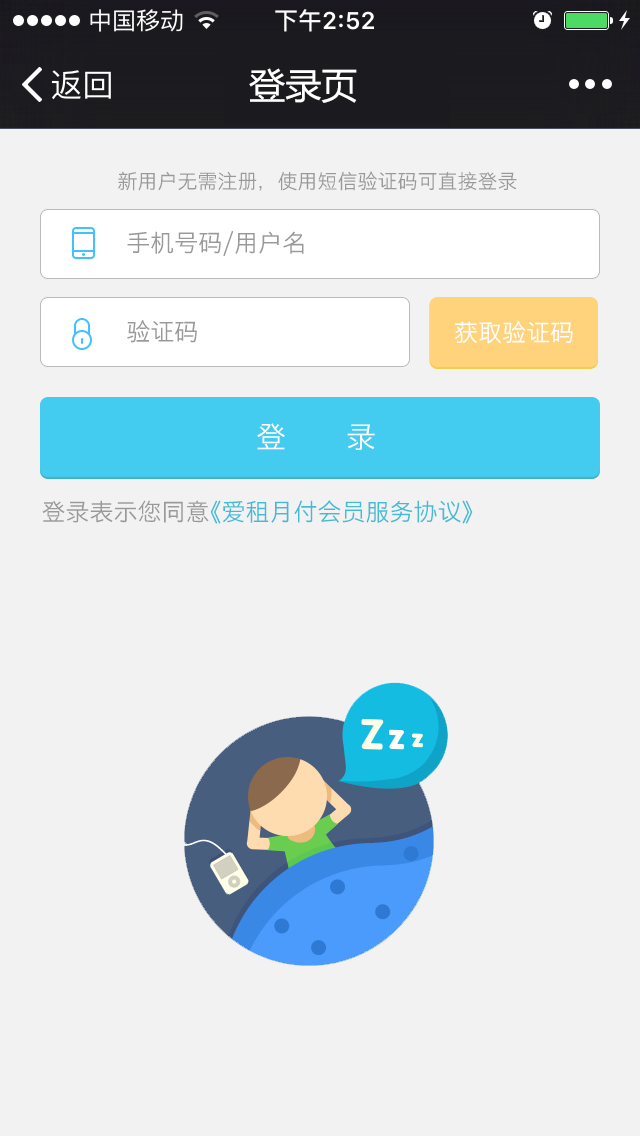
<style>
.page{position:relative;width:640px;height:1136px;background:#f2f2f2}
.page>*{position:absolute;margin:0}
.t1{font:36px "MicrosoftYaHei";color:#ffffff}
.t2{font:20px "STHeitiSC-Light";color:#999999}
.t3{font:24px "STHeitiSC-Light";color:#999999}
.t4{font:24px "STHeitiSC-Light";color:#ffffff}
.t5{font:30px "HiraginoSansGB-W3";color:#ffffff}
.t6{font:24px "STHeitiSC-Light";color:#43bbd5}
</style>
<div class="page">
<p class="t1" style="left:249px;top:68px;width:108px;height:35px">登录页</p>
<p class="t2" style="left:118px;top:171px;width:399px;height:20px">新用户无需注册，使用短信验证码可直接登录</p>
<p class="t3" style="left:127px;top:230px;width:177px;height:27px">手机号码/用户名</p>
<p class="t3" style="left:127px;top:320px;width:70px;height:23px">验证码</p>
<p class="t4" style="left:455px;top:320px;width:118px;height:24px">获取验证码</p>
<p class="t5" style="left:257px;top:423px;width:118px;height:27px">登      录</p>
<p class="t6" style="left:42px;top:500px;width:431px;height:24px"><span class="t3">登录表示您同意</span>《爱租月付会员服务协议》</p>
</div>
